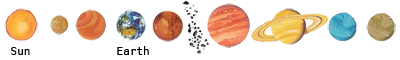
<style>
.page{position:relative;width:400px;height:60px;background:#ffffff}
.page>*{position:absolute;margin:0}
.t1{font:11px "Menlo-Regular";color:#000000}
</style>
<div class="page">
<p class="t1" style="left:11px;top:46px;width:138px;height:9px">Sun             Earth</p>
</div>
